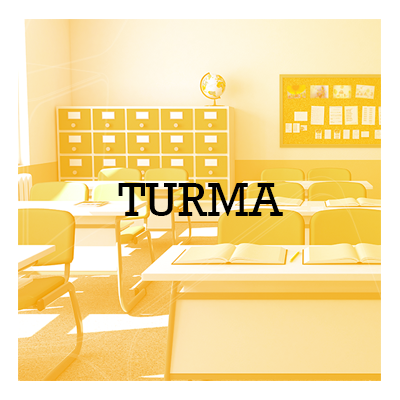
<style>
.page{position:relative;width:400px;height:400px;background:#ffffff}
.page>*{position:absolute;margin:0}
.t1{font:48px "Rockwell";color:#000000}
</style>
<div class="page">
<p class="t1" style="left:118px;top:183px;width:165px;height:33px">TURMA</p>
</div>
